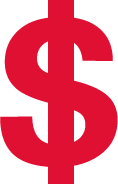
<style>
.page{position:relative;width:118px;height:184px;background:#e01033}
.page>*{position:absolute;margin:0}
.t1{font:200px "Univers-Bold";color:#e01033}
</style>
<div class="page">
<p class="t1" style="left:0px;top:16px;width:118px;height:151px">S</p>
</div>
